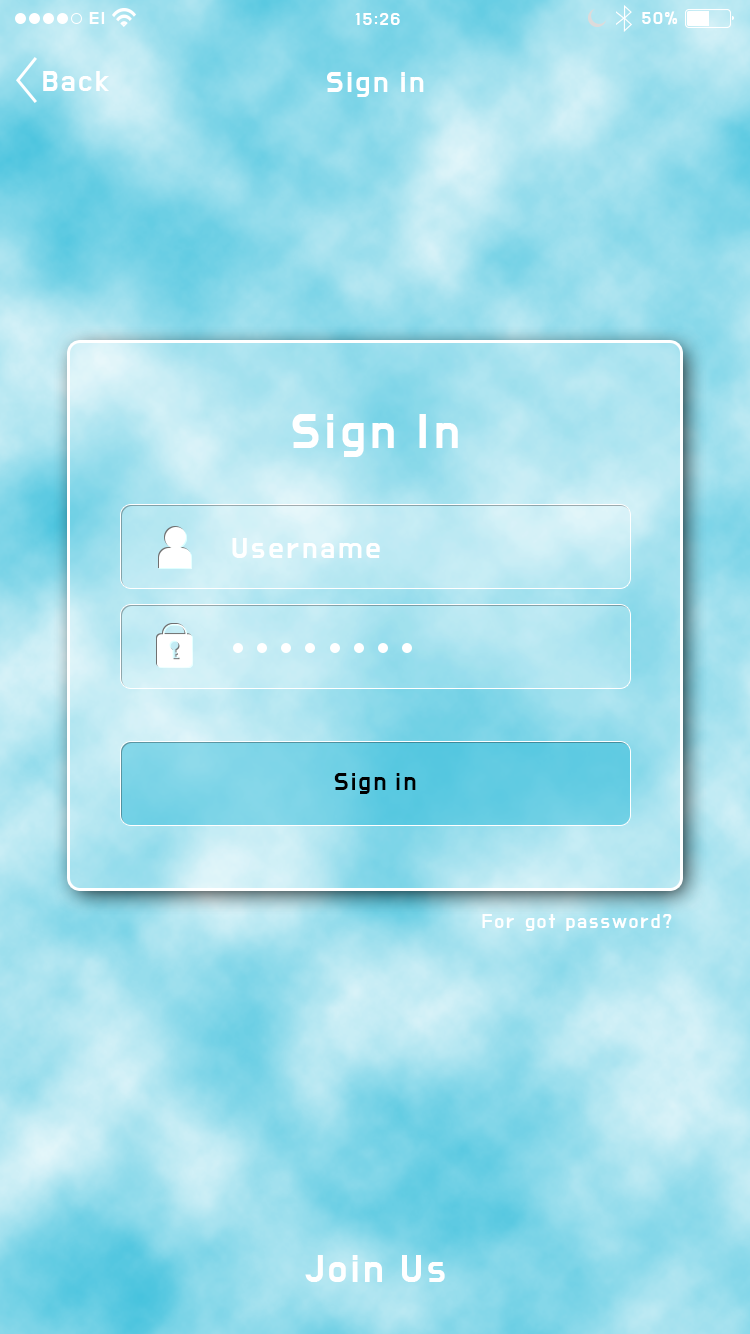
<style>
.page{position:relative;width:750px;height:1334px}
.page>*{position:absolute;margin:0}
.t1{font:18px "DoHyeon-Regular";letter-spacing:0.1em;color:#ffffff}
.t2{font:30px "DoHyeon-Regular";letter-spacing:0.1em;color:#ffffff}
.t3{font:50px "DoHyeon-Regular";letter-spacing:0.1em;color:#ffffff}
.t4{font:25.1px "DoHyeon-Regular";letter-spacing:0.1em;color:#000000}
.t5{font:20px "DoHyeon-Regular";letter-spacing:0.1em;color:#ffffff}
.t6{font:40px "DoHyeon-Regular";letter-spacing:0.1em;color:#ffffff}
</style>
<div class="page">
<p class="t1" style="left:89px;top:12px;width:16px;height:12px">El</p>
<p class="t1" style="left:355px;top:13px;width:45px;height:12px">15:26</p>
<p class="t1" style="left:642px;top:11px;width:36px;height:14px">50%</p>
<p class="t2" style="left:43px;top:71px;width:66px;height:20px">Back</p>
<p class="t2" style="left:327px;top:72px;width:97px;height:25px">Sign in</p>
<p class="t3" style="left:292px;top:414px;width:166px;height:43px">Sign In</p>
<p class="t2" style="left:232px;top:538px;width:148px;height:20px">Username</p>
<p class="t4" style="left:334px;top:773px;width:82px;height:21px">Sign in</p>
<p class="t5" style="left:482px;top:914px;width:190px;height:17px">For got password?</p>
<p class="t6" style="left:305px;top:1255px;width:140px;height:27px">Join Us</p>
</div>
